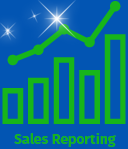
<style>
.page{position:relative;width:128px;height:149px;background:#0255b3}
.page>*{position:absolute;margin:0}
.t1{font:14px "FiraSansOT-Bold";color:#17b51a}
</style>
<div class="page">
<p class="t1" style="left:14px;top:133px;width:102px;height:14px">Sales Reporting</p>
</div>
